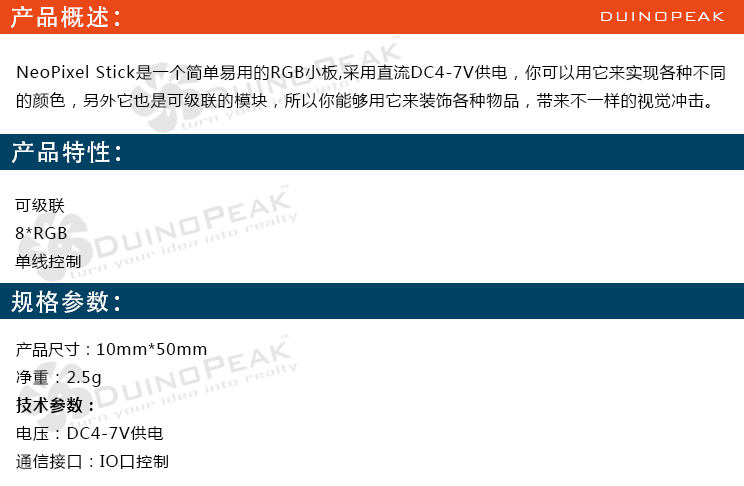
<style>
.page{position:relative;width:744px;height:486px;background:#ffffff}
.page>*{position:absolute;margin:0}
.t1{font:24px "AdobeHeitiStd-Regular";letter-spacing:0.05em;color:#ffffff}
.t2{font:18px "BankGothicBT-Light";letter-spacing:0.05em;color:#ffffff}
.t3{font:16px "MicrosoftYaHei";letter-spacing:0.05em;color:#000000}
.t4{font:16px "MicrosoftYaHei";color:#000000}
.t5{font:16px "MicrosoftYaHei-Bold";letter-spacing:0.05em;color:#000000}
</style>
<div class="page">
<p class="t1" style="left:10px;top:6px;width:109px;height:23px">产品概述：</p>
<p class="t2" style="left:601px;top:12px;width:124px;height:9px">DUINOPEAK</p>
<p class="t3" style="left:16px;top:64px;width:709px;height:45px">NeoPixel Stick是一个简单易用的RGB小板,采用直流DC4-7V供电，你可以用它来实现各种不同<br>的颜色，另外它也是可级联的模块，所以你能够用它来装饰各种物品，带来不一样的视觉冲击。</p>
<p class="t1" style="left:11px;top:140px;width:109px;height:24px">产品特性：</p>
<p class="t3" style="left:15px;top:198px;width:66px;height:72px">可级联<br>8*RGB<br>单线控制</p>
<p class="t1" style="left:11px;top:290px;width:108px;height:23px">规格参数：</p>
<p class="t3" style="left:16px;top:342px;width:191px;height:127px"><span class="t4">产品尺寸：</span>10mm*50mm<br>净重：2.5g<br><span class="t5">技术参数：<br></span>电压：DC4-7V供电<br>通信接口：IO口控制</p>
</div>
